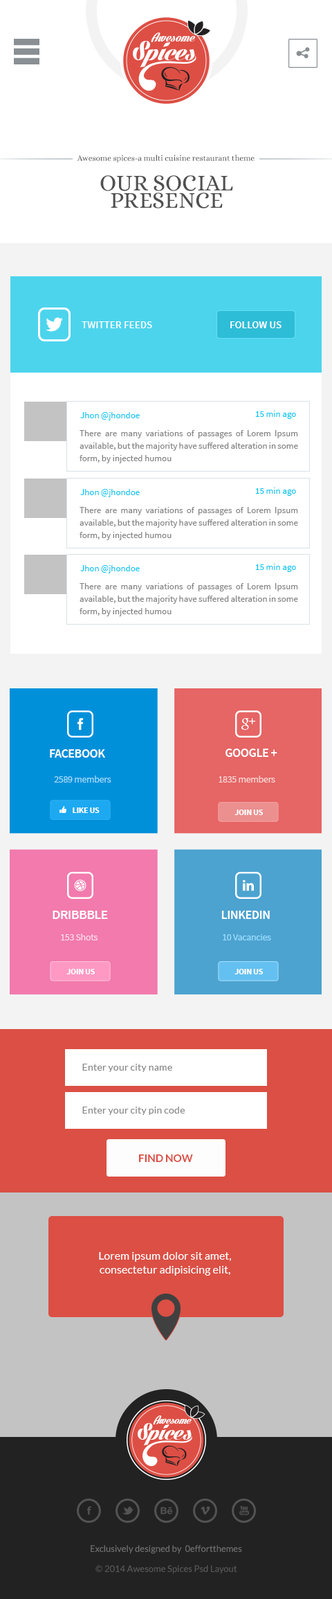
<style>
.page{position:relative;width:332px;height:1599px;background:#ffffff}
.page>*{position:absolute;margin:0}
.t1{font:7.9px "Alice-Regular";color:#505050}
.t2{font:23.1px/17.3px "Alice-Regular";color:#505050;text-transform:uppercase}
.t3{font:10.4px "SourceSansPro-Semibold";color:#ffffff;text-transform:uppercase}
.t4{font:9px "SourceSansPro-Regular";color:#00c6f1}
.t5{font:9px/12.5px "SourceSansPro-Regular";color:#848484}
.t6{font:12.5px "SourceSansPro-Semibold";letter-spacing:-0.025em;color:#ffffff;text-transform:uppercase}
.t7{font:9.7px "SourceSansPro-Regular";letter-spacing:-0.025em;color:#9ddcfc}
.t8{font:9.7px "SourceSansPro-Regular";letter-spacing:-0.025em;color:#fcd8d8}
.t9{font:8.3px "SourceSansPro-Bold";letter-spacing:-0.025em;color:#ffffff;text-transform:uppercase}
.t10{font:13.5px "SourceSansPro-Semibold";letter-spacing:-0.025em;color:#ffffff;text-transform:uppercase}
.t11{font:9.7px "SourceSansPro-Regular";letter-spacing:-0.025em;color:#ffdbea}
.t12{font:9.7px "SourceSansPro-Regular";letter-spacing:-0.025em;color:#9addff}
.t13{font:9.9px "Lato-Regular";color:#888888}
.t14{font:10.5px "Lato-Bold";color:#db4f44;text-transform:uppercase}
.t15{font:11.1px/13.8px "Lato-Regular";color:#ffffff}
.t16{font:9px "Lato-Regular";color:#737373}
.t17{font:9px "Lato-Regular";color:#5a5a5a}
</style>
<div class="page">
<p class="t1" style="left:77px;top:154px;width:178px;height:9px">Awesome spices-a multi cuisine restaurant theme</p>
<p class="t2" style="left:100px;top:175px;width:133px;height:33px;text-align:center">our social<br>presence</p>
<p class="t3" style="left:82px;top:321px;width:70px;height:7px">Twitter feeds</p>
<p class="t3" style="left:231px;top:321px;width:51px;height:7px">follow us</p>
<p class="t4" style="left:80px;top:412px;width:60px;height:8px">Jhon @jhondoe</p>
<p class="t4" style="left:255px;top:411px;width:41px;height:8px">15 min ago</p>
<p class="t5" style="left:80px;top:430px;width:218px;height:33px;text-align:justify">There are many variations of passages of Lorem Ipsum available, but the majority have suffered alteration in some form, by injected humou</p>
<p class="t4" style="left:80px;top:489px;width:60px;height:8px">Jhon @jhondoe</p>
<p class="t4" style="left:255px;top:487px;width:41px;height:9px">15 min ago</p>
<p class="t5" style="left:80px;top:507px;width:218px;height:33px;text-align:justify">There are many variations of passages of Lorem Ipsum available, but the majority have suffered alteration in some form, by injected humou</p>
<p class="t4" style="left:80px;top:565px;width:60px;height:8px">Jhon @jhondoe</p>
<p class="t4" style="left:255px;top:564px;width:41px;height:8px">15 min ago</p>
<p class="t5" style="left:80px;top:583px;width:218px;height:33px;text-align:justify">There are many variations of passages of Lorem Ipsum available, but the majority have suffered alteration in some form, by injected humou</p>
<p class="t6" style="left:50px;top:749px;width:55px;height:8px">facebook</p>
<p class="t6" style="left:226px;top:748px;width:52px;height:9px">google +</p>
<p class="t7" style="left:54px;top:775px;width:57px;height:7px">2589 members</p>
<p class="t8" style="left:219px;top:775px;width:57px;height:7px">1835 members</p>
<p class="t9" style="left:73px;top:807px;width:27px;height:6px">like us</p>
<p class="t9" style="left:235px;top:809px;width:29px;height:6px">join us</p>
<p class="t10" style="left:53px;top:910px;width:55px;height:9px">dribbble</p>
<p class="t6" style="left:222px;top:910px;width:48px;height:9px">linkedin</p>
<p class="t11" style="left:61px;top:933px;width:37px;height:7px">153 Shots</p>
<p class="t12" style="left:223px;top:934px;width:48px;height:6px">10 Vacancies</p>
<p class="t9" style="left:66px;top:969px;width:30px;height:5px">join us</p>
<p class="t9" style="left:235px;top:969px;width:29px;height:5px">join us</p>
<p class="t13" style="left:82px;top:1063px;width:90px;height:9px">Enter your city name</p>
<p class="t13" style="left:82px;top:1106px;width:104px;height:9px">Enter your city pin code</p>
<p class="t14" style="left:139px;top:1154px;width:54px;height:8px">find Now</p>
<p class="t15" style="left:99px;top:1252px;width:132px;height:23px;text-align:center">Lorem ipsum dolor sit amet, consectetur adipisicing elit,</p>
<p class="t16" style="left:91px;top:1545px;width:151px;height:9px">Exclusively designed by  0effortthemes</p>
<p class="t17" style="left:96px;top:1565px;width:141px;height:9px">© 2014 Awesome Spices Psd Layout</p>
</div>
